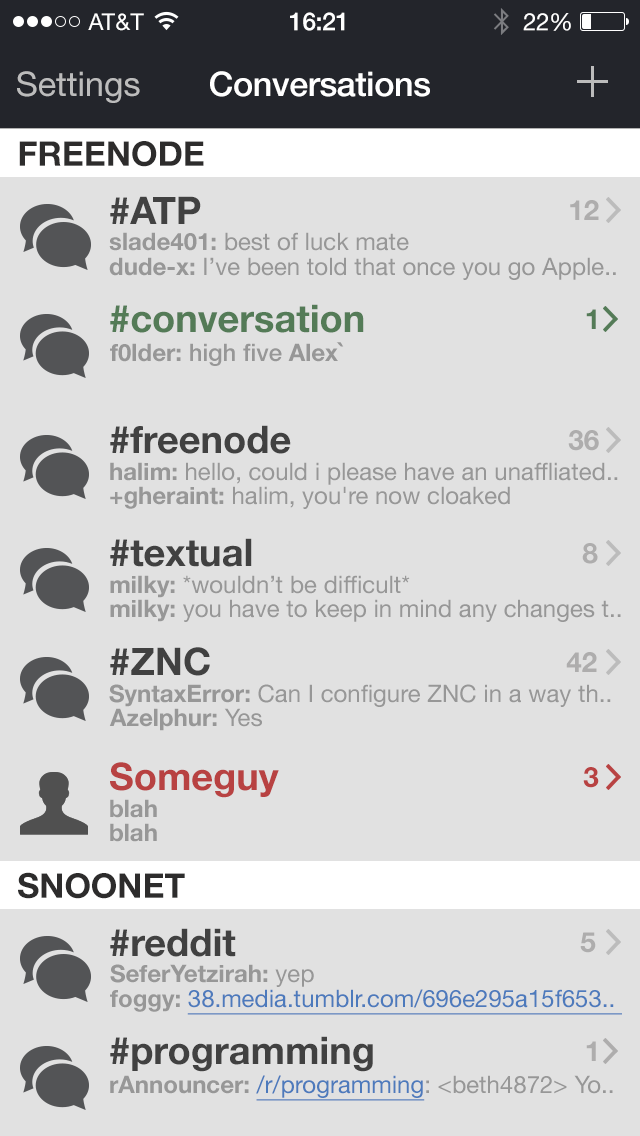
<style>
.page{position:relative;width:640px;height:1136px;background:#e1e1e1}
.page>*{position:absolute;margin:0}
.t1{font:23px "HelveticaNeue";letter-spacing:0.02em;color:#ffffff}
.t2{font:25px "HelveticaNeue-Medium";letter-spacing:-0.02em;color:#ffffff}
.t3{font:24px "HelveticaNeue";letter-spacing:-0.02em;color:#ffffff}
.t4{font:34px "HelveticaNeue";color:#bcbcbc}
.t5{font:34px "HelveticaNeue-Medium";letter-spacing:-0.01em;color:#ffffff}
.t6{font:34px "HelveticaNeue-Bold";color:#2d2c2c;text-transform:uppercase}
.t7{font:38px "HelveticaNeue-Bold";color:#414141;text-transform:uppercase}
.t8{font:28px "HelveticaNeue-Bold";color:#aeadad}
.t9{font:24px "HelveticaNeue";color:#979797}
.t10{font:24px "HelveticaNeue-Bold";color:#979797}
.t11{font:38px "HelveticaNeue-Bold";color:#547b57}
.t12{font:28px "HelveticaNeue-Bold";color:#547b57}
.t13{font:24px "HelveticaNeue-Medium";color:#979797}
.t14{font:38px "HelveticaNeue-Bold";color:#414141}
.t15{font:38px "HelveticaNeue-Bold";color:#b84242}
.t16{font:28px "HelveticaNeue-Bold";color:#b84242}
.t17{font:24px "HelveticaNeue";color:#4d7abc;text-decoration:underline}
</style>
<div class="page">
<p class="t1" style="left:88px;top:13px;width:56px;height:18px">AT&amp;T</p>
<p class="t2" style="left:290px;top:12px;width:55px;height:19px">16:21</p>
<p class="t3" style="left:523px;top:13px;width:48px;height:18px">22%</p>
<p class="t4" style="left:17px;top:71px;width:123px;height:32px">Settings</p>
<p class="t5" style="left:210px;top:71px;width:220px;height:26px">Conversations</p>
<p class="t6" style="left:19px;top:141px;width:185px;height:26px">Freenode</p>
<p class="t7" style="left:110px;top:196px;width:91px;height:28px">#ATP</p>
<p class="t8" style="left:570px;top:200px;width:29px;height:20px">12</p>
<p class="t9" style="left:109px;top:232px;width:300px;height:19px"><span class="t10">slade401:</span> best of luck mate</p>
<p class="t9" style="left:109px;top:257px;width:507px;height:23px"><span class="t10">dude-x:</span> I’ve been told that once you go Apple..</p>
<p class="t11" style="left:110px;top:304px;width:254px;height:29px">#conversation</p>
<p class="t12" style="left:586px;top:309px;width:10px;height:20px">1</p>
<p class="t13" style="left:110px;top:342px;width:234px;height:24px"><span class="t10">f0lder:</span> high five <span class="t10">Alex`</span></p>
<p class="t14" style="left:110px;top:425px;width:181px;height:29px">#freenode</p>
<p class="t8" style="left:568px;top:430px;width:31px;height:21px">36</p>
<p class="t9" style="left:110px;top:462px;width:508px;height:23px"><span class="t10">halim:</span> hello, could i please have an unaffliated..</p>
<p class="t9" style="left:110px;top:486px;width:400px;height:23px"><span class="t10">+gheraint:</span> halim, you're now cloaked</p>
<p class="t14" style="left:110px;top:538px;width:142px;height:29px">#textual</p>
<p class="t8" style="left:582px;top:543px;width:16px;height:21px">8</p>
<p class="t9" style="left:110px;top:575px;width:300px;height:23px"><span class="t10">milky: </span>*wouldn’t be difficult*</p>
<p class="t9" style="left:110px;top:599px;width:511px;height:23px"><span class="t10">milky: </span>you have to keep in mind any changes t..</p>
<p class="t14" style="left:110px;top:647px;width:100px;height:29px">#ZNC</p>
<p class="t8" style="left:566px;top:652px;width:31px;height:20px">42</p>
<p class="t9" style="left:109px;top:684px;width:502px;height:23px"><span class="t10">SyntaxError:</span> Can I configure ZNC in a way th..</p>
<p class="t10" style="left:109px;top:708px;width:153px;height:23px">Azelphur: <span class="t9">Yes</span></p>
<p class="t15" style="left:110px;top:762px;width:169px;height:36px">Someguy</p>
<p class="t16" style="left:583px;top:767px;width:16px;height:21px">3</p>
<p class="t10" style="left:110px;top:799px;width:47px;height:19px">blah</p>
<p class="t10" style="left:110px;top:823px;width:47px;height:19px">blah</p>
<p class="t6" style="left:18px;top:872px;width:167px;height:27px">SNOONET</p>
<p class="t14" style="left:110px;top:928px;width:126px;height:29px">#reddit</p>
<p class="t8" style="left:580px;top:932px;width:16px;height:21px">5</p>
<p class="t10" style="left:110px;top:964px;width:204px;height:23px">SeferYetzirah: <span class="t9">yep</span></p>
<p class="t17" style="left:110px;top:989px;width:512px;height:26px"><span class="t10">foggy: </span>38.media.tumblr.com/696e295a15f653..</p>
<p class="t14" style="left:110px;top:1036px;width:263px;height:36px">#programming</p>
<p class="t8" style="left:586px;top:1041px;width:10px;height:20px">1</p>
<p class="t9" style="left:110px;top:1075px;width:503px;height:26px"><span class="t10">rAnnouncer: </span><span class="t17">/r/programming</span>: &lt;beth4872&gt; Yo..</p>
</div>
